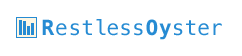
<style>
.page{position:relative;width:242px;height:56px;background:#ffffff}
.page>*{position:absolute;margin:0}
.t1{font:21.1px "Menlo-Regular";color:#268bd3}
.t2{font:21.1px "Menlo-Bold";letter-spacing:0.04em;color:#268bd3}
.t3{font:21.1px "Menlo-Regular";letter-spacing:0.04em;color:#268bd3}
.t4{font:21.1px "Menlo-Bold";color:#268bd3}
</style>
<div class="page">
<p class="t1" style="left:42px;top:19px;width:180px;height:21px"><span class="t2">R</span><span class="t3">e</span>stles<span class="t3">s</span><span class="t2">O</span><span class="t4">y</span>ster</p>
</div>
